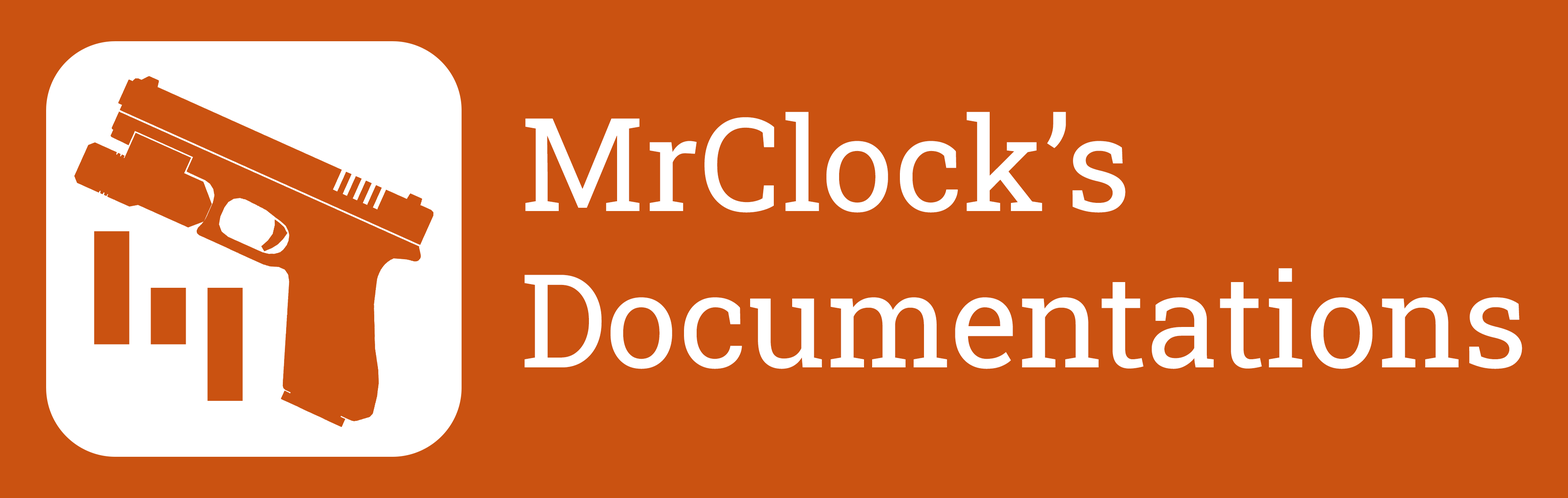
<style>
.page{position:relative;width:1568px;height:498px;background:#ca5211}
.page>*{position:absolute;margin:0}
.t1{font:130px "RobotoSlab-Regular";color:#ffffff}
</style>
<div class="page">
<p class="t1" style="left:524px;top:112px;width:998px;height:257px">MrClock’s<br>Documentations</p>
</div>
